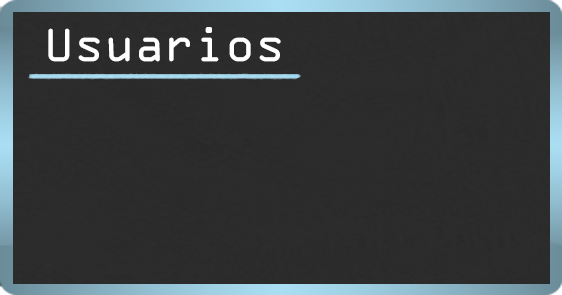
<style>
.page{position:relative;width:562px;height:295px;background:#2c2c2c}
.page>*{position:absolute;margin:0}
.t1{font:50px "OCRAExtended";color:#ffffff}
</style>
<div class="page">
<p class="t1" style="left:48px;top:27px;width:233px;height:35px">Usuarios</p>
</div>
